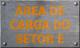
<style>
.page{position:relative;width:80px;height:48px}
.page>*{position:absolute;margin:0}
.t1{font:12px/14px "Verdana-Bold";letter-spacing:-0.04em;color:#ce7d1f;scale:0.9 1}
</style>
<div class="page">
<p class="t1" style="left:10px;top:3px;width:60px;height:41px;text-align:center">ÁREA DE<br>CARGA DO<br>SETOR E</p>
</div>
